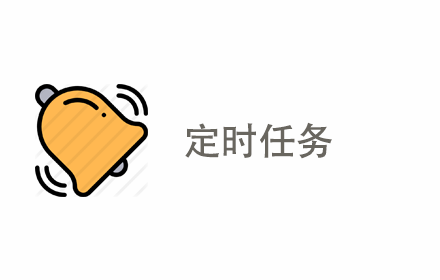
<style>
.page{position:relative;width:440px;height:280px;background:#fefefe}
.page>*{position:absolute;margin:0}
.t1{font:37.5px "STHeitiSC-Medium";color:#69665f}
</style>
<div class="page">
<p class="t1" style="left:185px;top:122px;width:147px;height:37px">定时任务</p>
</div>
